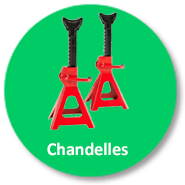
<style>
.page{position:relative;width:185px;height:185px;background:#00cc66}
.page>*{position:absolute;margin:0}
.t1{font:18px "Calibri-Bold";color:#ffffff}
</style>
<div class="page">
<p class="t1" style="left:47px;top:142px;width:81px;height:14px">Chandelles</p>
</div>
